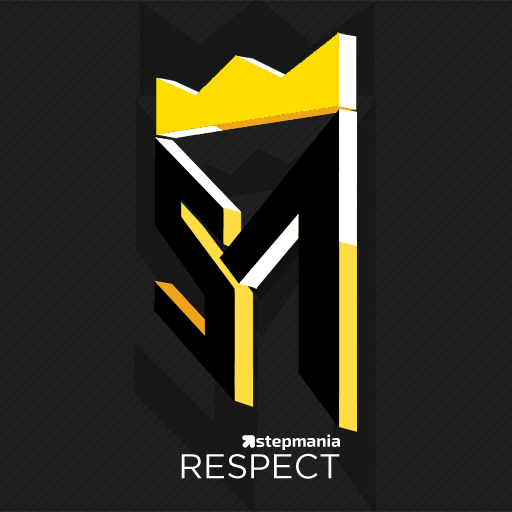
<style>
.page{position:relative;width:512px;height:512px;background:#202020}
.page>*{position:absolute;margin:0}
.t1{font:17.1px "Exo2.0-Bold";color:#ffffff}
.t2{font:34.1px "Gotham-Book";color:#ffffff}
</style>
<div class="page">
<p class="t1" style="left:256px;top:434px;width:84px;height:16px">stepmania</p>
<p class="t2" style="left:181px;top:453px;width:159px;height:26px">RESPECT</p>
</div>
